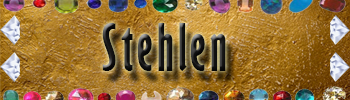
<style>
.page{position:relative;width:350px;height:100px}
.page>*{position:absolute;margin:0}
.t1{font:60px "GillSansMT-ExtraCondensedBold";letter-spacing:0.07em}
</style>
<div class="page">
<p class="t1" style="left:102px;top:23px;width:124px;height:48px">Stehlen</p>
</div>
